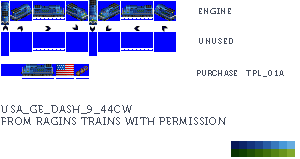
<style>
.page{position:relative;width:300px;height:159px;background:#ffffff}
.page>*{position:absolute;margin:0}
.t1{font:8px "Museo700-Regular";letter-spacing:0.075em;color:#444c5c;text-transform:uppercase}
.t2{font:8px "Museo700-Regular";color:#444c5c;text-transform:uppercase}
.t3{font:8px "Museo700-Regular";letter-spacing:0.1em;color:#444c5c;text-transform:uppercase}
.t4{font:10px "Museo700-Regular";letter-spacing:0.075em;color:#444c5c;text-transform:uppercase}
</style>
<div class="page">
<p class="t1" style="left:199px;top:8px;width:32px;height:6px">Engine</p>
<p class="t1" style="left:199px;top:38px;width:34px;height:6px">Unused</p>
<p class="t2" style="left:197px;top:70px;width:40px;height:6px">Purchase</p>
<p class="t3" style="left:246px;top:70px;width:38px;height:7px">tpl_01a</p>
<p class="t4" style="left:1px;top:105px;width:225px;height:20px">USA_GE_Dash_9_44CW<br>from ragins trains with permission</p>
</div>
